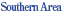
<style>
.page{position:relative;width:64px;height:18px;background:#ffffff}
.page>*{position:absolute;margin:0}
.t1{font:12px "RyuminPro-ExBold";letter-spacing:-0.08em;color:#2f4e96;scale:0.85 1}
</style>
<div class="page">
<p class="t1" style="left:0px;top:1px;width:62px;height:10px">Southern Area</p>
</div>
